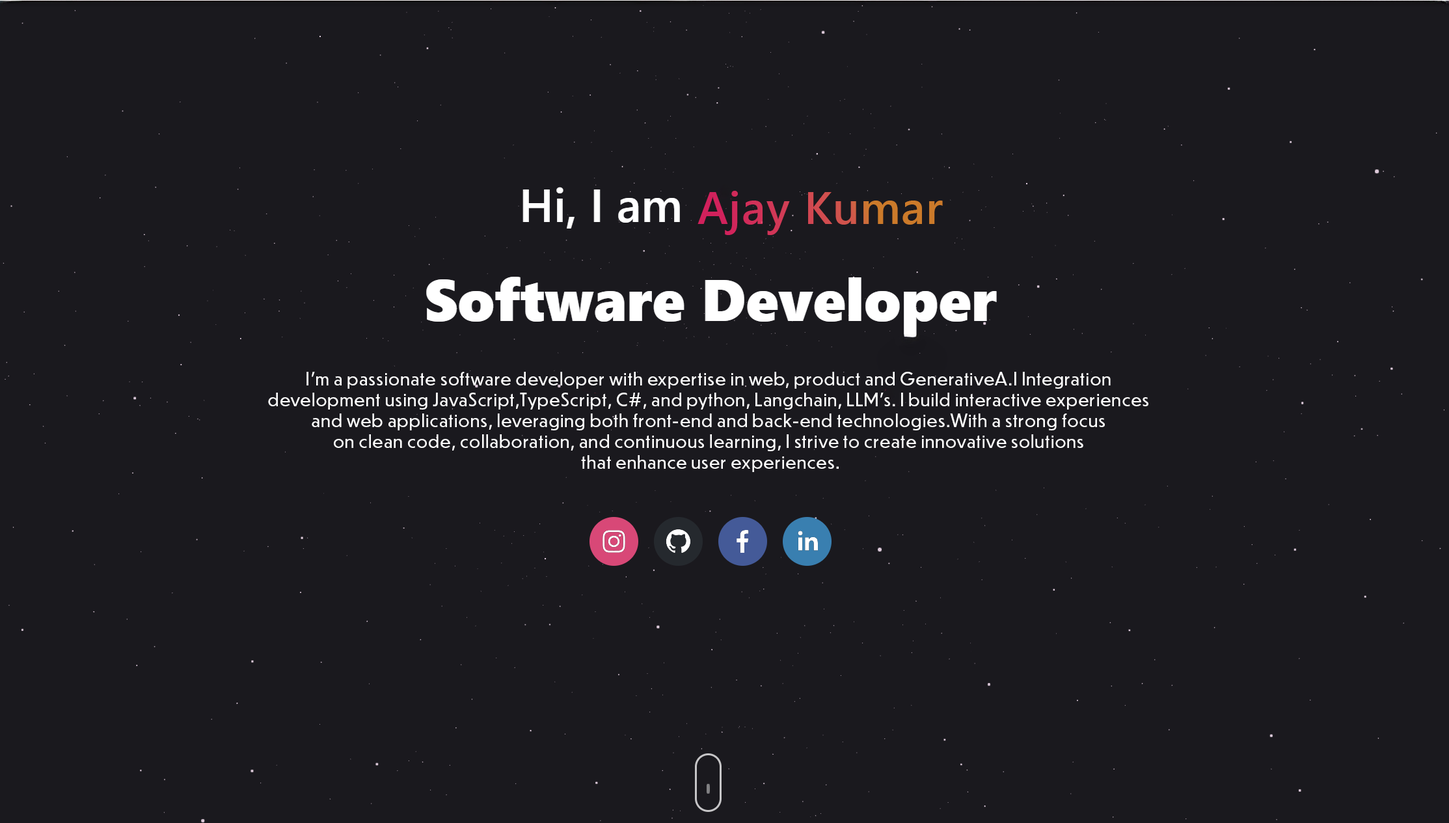
<style>
.page{position:relative;width:1449px;height:823px;background:#1a191e}
.page>*{position:absolute;margin:0}
.t1{font:45.6px "SegoeUI-Semibold";letter-spacing:0.02em}
.t2{font:17.4px "DunbarText-Regular";letter-spacing:0.02em;color:#ffffff}
</style>
<div class="page">
<p class="t1" style="left:698px;top:191px;width:245px;height:44px">Ajay Kumar</p>
<p class="t2" style="left:268px;top:372px;width:881px;height:100px;text-align:center">I'm a passionate software developer with expertise in web, product and GenerativeA.I Integration <br>development using JavaScript,TypeScript, C#, and python, Langchain, LLM's. I build interactive experiences <br>and web applications, leveraging both front-end and back-end technologies.With a strong focus <br>on clean code, collaboration, and continuous learning, I strive to create innovative solutions <br>that enhance user experiences.</p>
</div>
